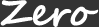
<style>
.page{position:relative;width:99px;height:27px;background:#333333}
.page>*{position:absolute;margin:0}
.t1{font:37.5px "SegoeScript-Bold";color:#ffffff}
</style>
<div class="page">
<p class="t1" style="left:0px;top:0px;width:99px;height:27px">Zero</p>
</div>
